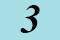
<style>
.page{position:relative;width:60px;height:40px;background:#a7e0e4}
.page>*{position:absolute;margin:0}
.t1{font:41.7px "TimesNewRomanPS-BoldItalicMT";color:#000000}
</style>
<div class="page">
<p class="t1" style="left:20px;top:5px;width:20px;height:28px">3</p>
</div>
